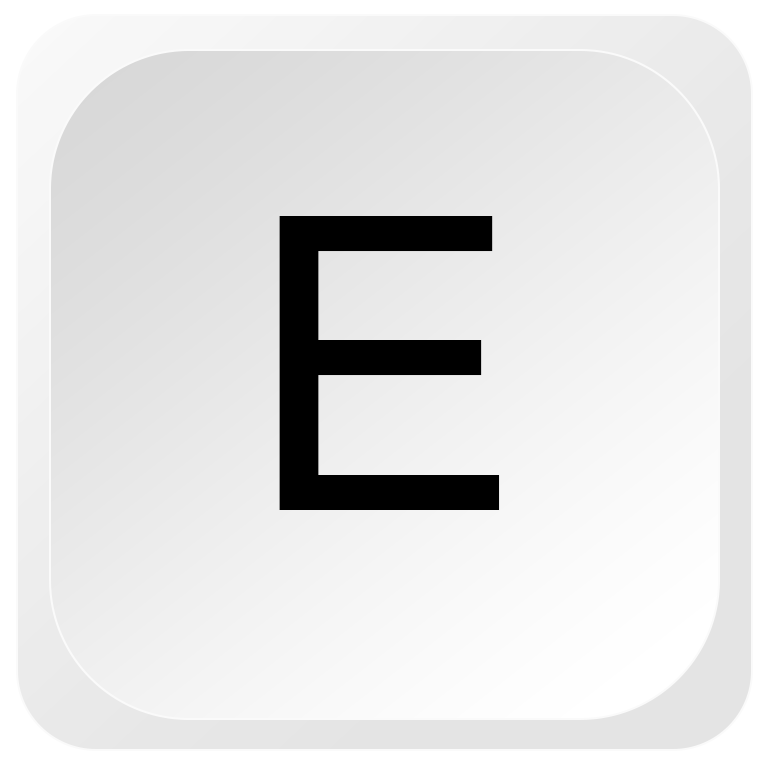
<style>
.page{position:relative;width:768px;height:768px}
.page>*{position:absolute;margin:0}
.t1{font:411px "ArialMT";color:#000000}
</style>
<div class="page">
<p class="t1" style="left:279px;top:216px;width:221px;height:294px">E</p>
</div>
